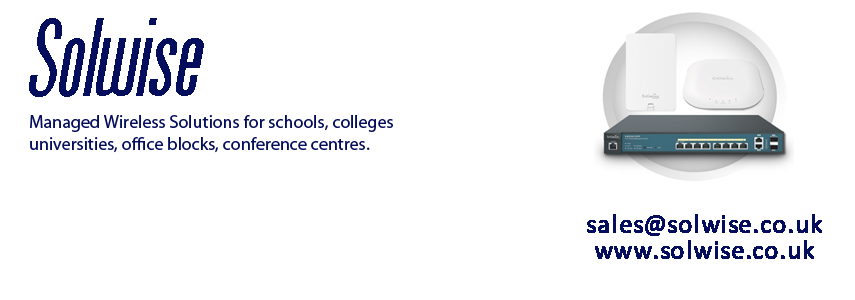
<style>
.page{position:relative;width:855px;height:300px;background:#ffffff}
.page>*{position:absolute;margin:0}
.t1{font:107.9px "Arizona";color:#050e5c;font-style:italic}
.t2{font:18px "MyriadPro-Regular";color:#050e5c}
.t3{font:25.9px/25.9px "Calibri";color:#050e5c;font-weight:bold}
</style>
<div class="page">
<p class="t1" style="left:29px;top:18px;width:175px;height:79px">Solwise</p>
<p class="t2" style="left:30px;top:115px;width:363px;height:38px">Managed Wireless Solutions for schools, colleges<br>universities, office blocks, conference centres.</p>
<p class="t3" style="left:587px;top:214px;width:235px;height:45px;text-align:center">sales@solwise.co.uk<br>www.solwise.co.uk</p>
</div>
